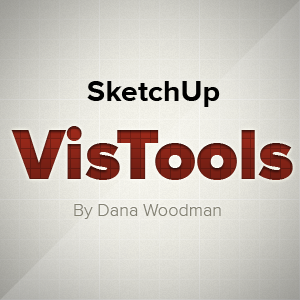
<style>
.page{position:relative;width:300px;height:300px}
.page>*{position:absolute;margin:0}
.t1{font:30.1px "ProximaNova-Bold";color:#000000}
.t2{font:73px "ProximaNova-Black";color:#792015}
.t3{font:18px "ProximaNova-Light";color:#848274}
</style>
<div class="page">
<p class="t1" style="left:87px;top:81px;width:133px;height:26px">SketchUp</p>
<p class="t2" style="left:11px;top:126px;width:282px;height:54px">VisTools</p>
<p class="t3" style="left:74px;top:204px;width:147px;height:15px">By Dana Woodman</p>
</div>
